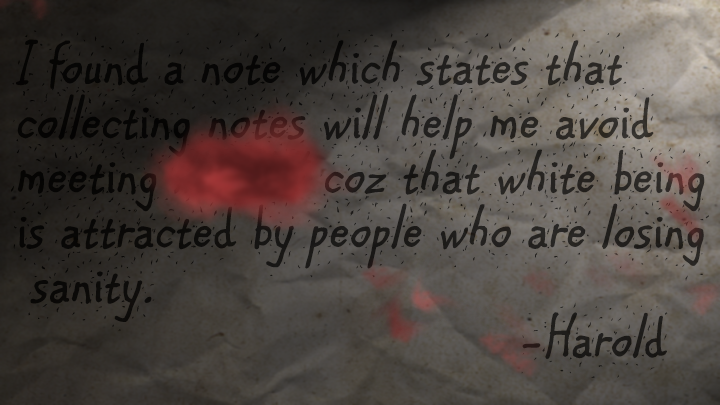
<style>
.page{position:relative;width:720px;height:405px}
.page>*{position:absolute;margin:0}
.t1{font:63.9px/54.6px "ARCARTER";font-style:italic}
</style>
<div class="page">
<p class="t1" style="left:11px;top:30px;width:699px;height:348px">I found a note which states that<br>collecting notes will help me avoid<br>meeting #### coz that white being<br>is attracted by people who are losing<br> sanity.<br>              -Harold</p>
</div>
